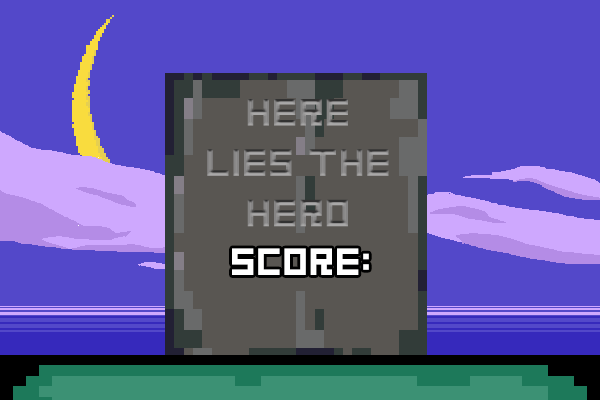
<style>
.page{position:relative;width:600px;height:400px;background:#5348c9}
.page>*{position:absolute;margin:0}
.t1{font:42px "GoodbyeDespair"}
.t2{font:42px "GoodbyeDespair";color:#ffffff}
</style>
<div class="page">
<p class="t1" style="left:207px;top:99px;width:182px;height:128px;text-align:center">here lies the hero</p>
<p class="t2" style="left:232px;top:248px;width:137px;height:27px">score:</p>
</div>
